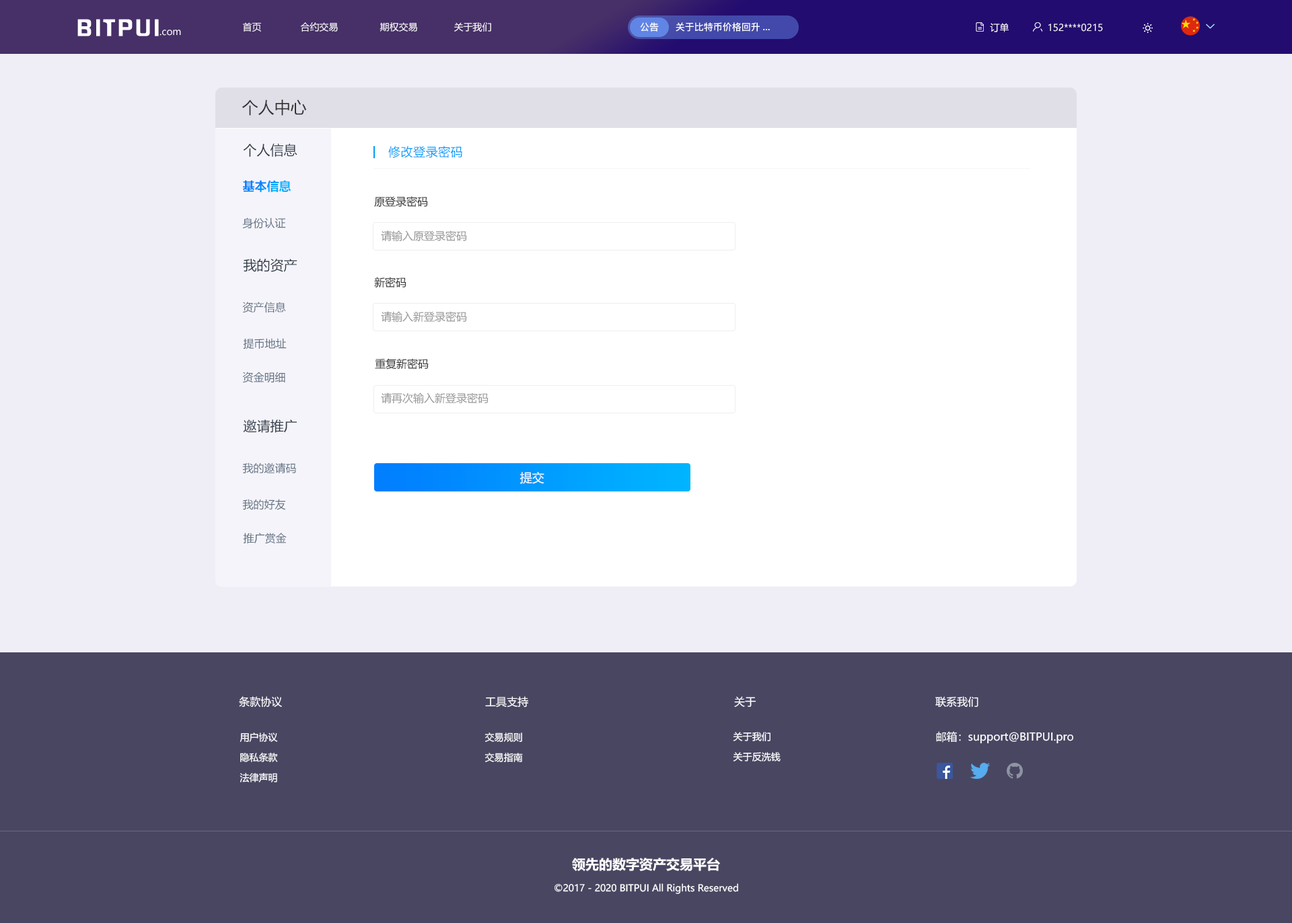
<style>
.page{position:relative;width:1292px;height:923px;background:#efeef7}
.page>*{position:absolute;margin:0}
.t1{font:20.6px "FZHZGBJW--GB1-0";letter-spacing:0.1em;color:#ffffff;scale:1.14 1}
.t2{font:9.4px "MicrosoftYaHei";color:#ffffff}
.t3{font:9.4px "PingFang-SC-Bold";color:#ffffff}
.t4{font:16.2px "MicrosoftYaHei";color:#333333}
.t5{font:13.5px "MicrosoftYaHei";color:#303b47}
.t6{font:12.1px "MicrosoftYaHei";letter-spacing:0.03em;color:#009dfa}
.t7{font:12.1px "MicrosoftYaHei-Bold";color:#009dfa}
.t8{font:10.8px "MicrosoftYaHei";color:#333333}
.t9{font:10.8px "MicrosoftYaHei";color:#637282}
.t10{font:10.8px "MicrosoftYaHei";color:#999999}
.t11{font:12.1px "MicrosoftYaHei";color:#ffffff}
.t12{font:10.8px "MicrosoftYaHei";color:#ffffff}
.t13{font:9.4px/20.2px "MicrosoftYaHei";color:#ffffff}
.t14{font:13.5px "MicrosoftYaHei-Bold";color:#ffffff}
</style>
<div class="page">
<p class="t1" style="left:77px;top:19px;width:82px;height:17px">BITPUI</p>
<p class="t2" style="left:160px;top:30px;width:21px;height:6px">.com</p>
<p class="t2" style="left:243px;top:22px;width:248px;height:10px">首页              合约交易               期权交易             关于我们</p>
<p class="t3" style="left:640px;top:22px;width:19px;height:10px">公告</p>
<p class="t3" style="left:676px;top:22px;width:94px;height:10px">关于比特币价格回升...</p>
<p class="t2" style="left:990px;top:23px;width:19px;height:9px">订单</p>
<p class="t2" style="left:1049px;top:24px;width:54px;height:8px">152****0215</p>
<p class="t4" style="left:242px;top:100px;width:65px;height:16px">个人中心</p>
<p class="t5" style="left:243px;top:143px;width:54px;height:14px">个人信息</p>
<p class="t6" style="left:388px;top:145px;width:74px;height:13px">修改登录密码</p>
<p class="t7" style="left:242px;top:180px;width:49px;height:12px">基本信息</p>
<p class="t8" style="left:374px;top:196px;width:54px;height:11px">原登录密码</p>
<p class="t9" style="left:242px;top:217px;width:44px;height:12px">身份认证</p>
<p class="t10" style="left:381px;top:230px;width:86px;height:12px">请输入原登录密码</p>
<p class="t5" style="left:243px;top:258px;width:54px;height:14px">我的资产</p>
<p class="t8" style="left:374px;top:277px;width:33px;height:10px">新密码</p>
<p class="t9" style="left:242px;top:302px;width:44px;height:11px">资产信息</p>
<p class="t10" style="left:381px;top:311px;width:86px;height:11px">请输入新登录密码</p>
<p class="t9" style="left:243px;top:338px;width:44px;height:11px">提币地址</p>
<p class="t8" style="left:375px;top:358px;width:54px;height:12px">重复新密码</p>
<p class="t9" style="left:242px;top:372px;width:43px;height:11px">资金明细</p>
<p class="t10" style="left:381px;top:392px;width:108px;height:12px">请再次输入新登录密码</p>
<p class="t5" style="left:243px;top:419px;width:54px;height:14px">邀请推广</p>
<p class="t9" style="left:242px;top:462px;width:54px;height:11px">我的邀请码</p>
<p class="t11" style="left:520px;top:472px;width:24px;height:12px">提交</p>
<p class="t9" style="left:242px;top:499px;width:44px;height:11px">我的好友</p>
<p class="t9" style="left:243px;top:532px;width:44px;height:12px">推广赏金</p>
<p class="t12" style="left:239px;top:696px;width:43px;height:11px">条款协议</p>
<p class="t12" style="left:485px;top:696px;width:43px;height:11px">工具支持</p>
<p class="t12" style="left:734px;top:696px;width:23px;height:11px">关于</p>
<p class="t12" style="left:936px;top:696px;width:43px;height:11px">联系我们</p>
<p class="t13" style="left:240px;top:732px;width:38px;height:50px;text-align:center">用户协议<br>隐私条款<br>法律声明</p>
<p class="t13" style="left:485px;top:732px;width:38px;height:30px">交易规则<br>交易指南</p>
<p class="t13" style="left:733px;top:732px;width:48px;height:29px">关于我们<br>关于反洗钱</p>
<p class="t12" style="left:936px;top:731px;width:138px;height:13px">邮箱：support@BITPUI.pro</p>
<p class="t14" style="left:572px;top:857px;width:148px;height:14px">领先的数字资产交易平台</p>
<p class="t2" style="left:555px;top:883px;width:183px;height:11px">©2017 - 2020 BITPUI All Rights Reserved</p>
</div>
